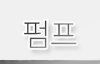
<style>
.page{position:relative;width:100px;height:64px;background:#f0f0f0}
.page>*{position:absolute;margin:0}
.t1{font:30px "NanumSquareL"}
</style>
<div class="page">
<p class="t1" style="left:24px;top:20px;width:53px;height:28px">펌프</p>
</div>
